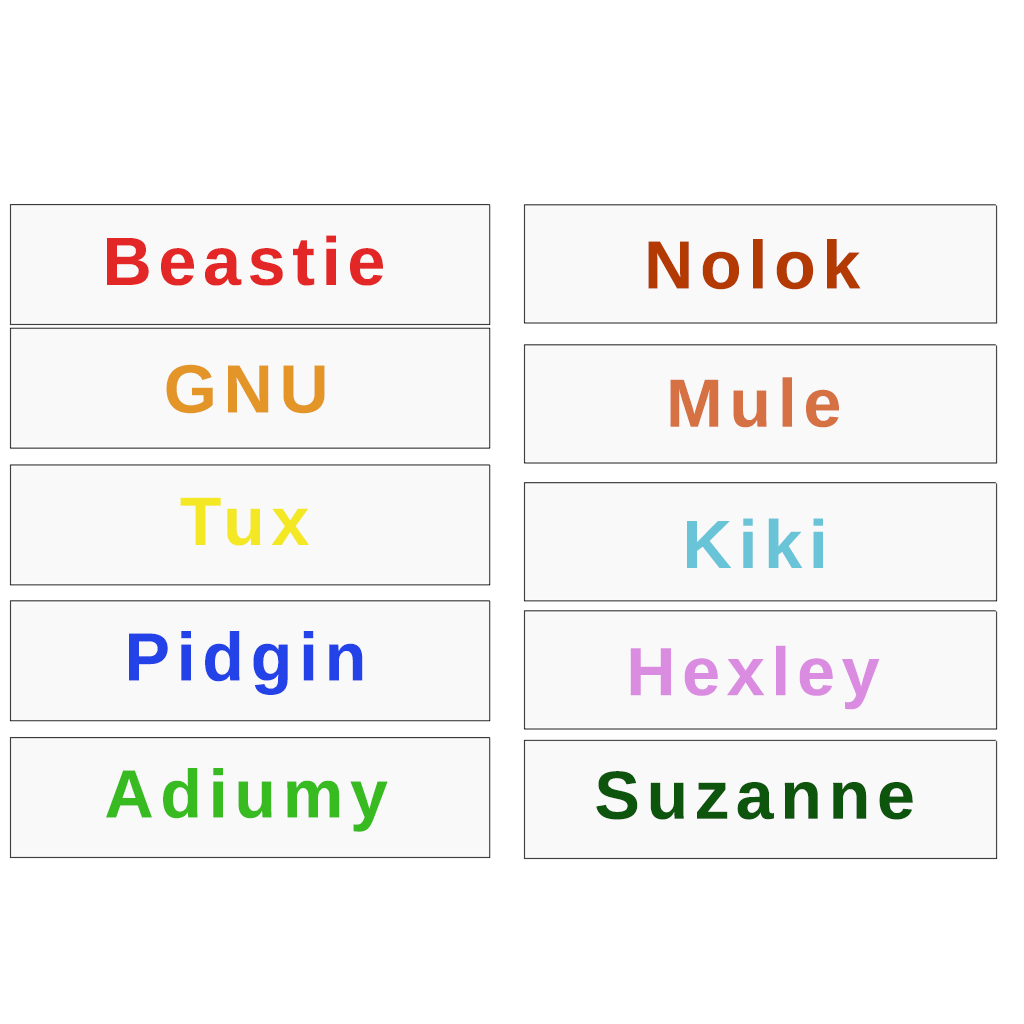
<style>
.page{position:relative;width:1024px;height:1024px;background:#f9f9f9}
.page>*{position:absolute;margin:0}
.t1{font:68px "LiberationSans-Bold";letter-spacing:0.1em;color:#e32727}
.t2{font:68px "LiberationSans-Bold";letter-spacing:0.1em;color:#b43a04}
.t3{font:68px "LiberationSans-Bold";letter-spacing:0.1em;color:#e39627}
.t4{font:68px "LiberationSans-Bold";letter-spacing:0.1em;color:#d67144}
.t5{font:68px "LiberationSans-Bold";letter-spacing:0.1em;color:#f4e825}
.t6{font:68px "LiberationSans-Bold";letter-spacing:0.1em;color:#6ac4d7}
.t7{font:68px "LiberationSans-Bold";letter-spacing:0.1em;color:#2343e8}
.t8{font:68px "LiberationSans-Bold";letter-spacing:0.1em;color:#da8ce1}
.t9{font:68px "LiberationSans-Bold";letter-spacing:0.1em;color:#37bb21}
.t10{font:68px "LiberationSans-Bold";letter-spacing:0.1em;color:#0d550d}
</style>
<div class="page">
<p class="t1" style="left:107px;top:235px;width:276px;height:51px">Beastie</p>
<p class="t2" style="left:648px;top:239px;width:213px;height:51px">Nolok</p>
<p class="t3" style="left:166px;top:364px;width:159px;height:50px">GNU</p>
<p class="t4" style="left:670px;top:377px;width:169px;height:51px">Mule</p>
<p class="t5" style="left:180px;top:497px;width:129px;height:49px">Tux</p>
<p class="t6" style="left:687px;top:518px;width:136px;height:50px">Kiki</p>
<p class="t7" style="left:129px;top:631px;width:234px;height:64px">Pidgin</p>
<p class="t8" style="left:630px;top:645px;width:250px;height:65px">Hexley</p>
<p class="t9" style="left:106px;top:768px;width:282px;height:64px">Adiumy</p>
<p class="t10" style="left:596px;top:771px;width:317px;height:49px">Suzanne</p>
</div>
